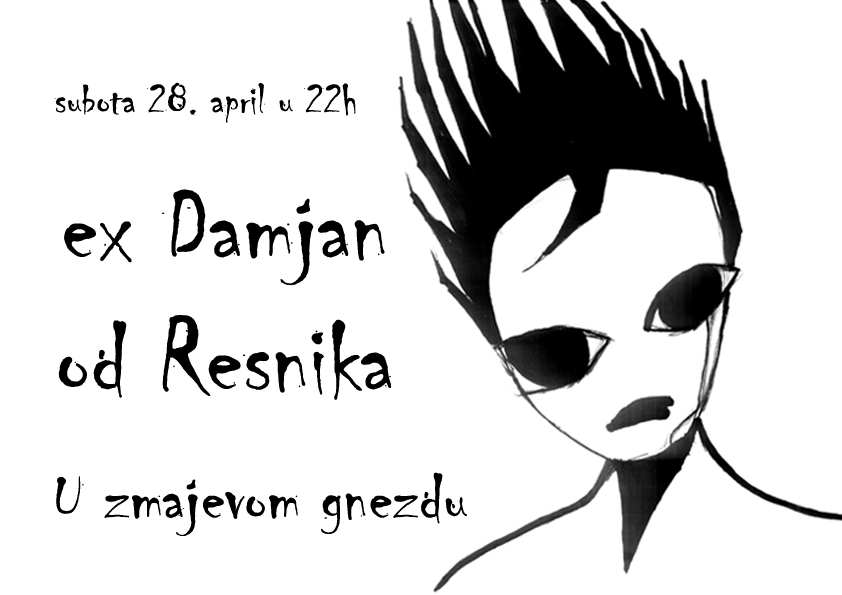
<style>
.page{position:relative;width:842px;height:595px;background:#ffffff}
.page>*{position:absolute;margin:0}
.t1{font:44.4px "Chiller-Regular";color:#000000}
.t2{font:110px "Chiller-Regular";color:#000000}
.t3{font:72px "Chiller-Regular";color:#000000}
</style>
<div class="page">
<p class="t1" style="left:54px;top:82px;width:302px;height:41px">subota 28. april u 22h</p>
<p class="t2" style="left:58px;top:189px;width:334px;height:211px;text-align:center">ex Damjan<br>od Resnika</p>
<p class="t3" style="left:56px;top:472px;width:411px;height:65px">U zmajevom gnezdu</p>
</div>
